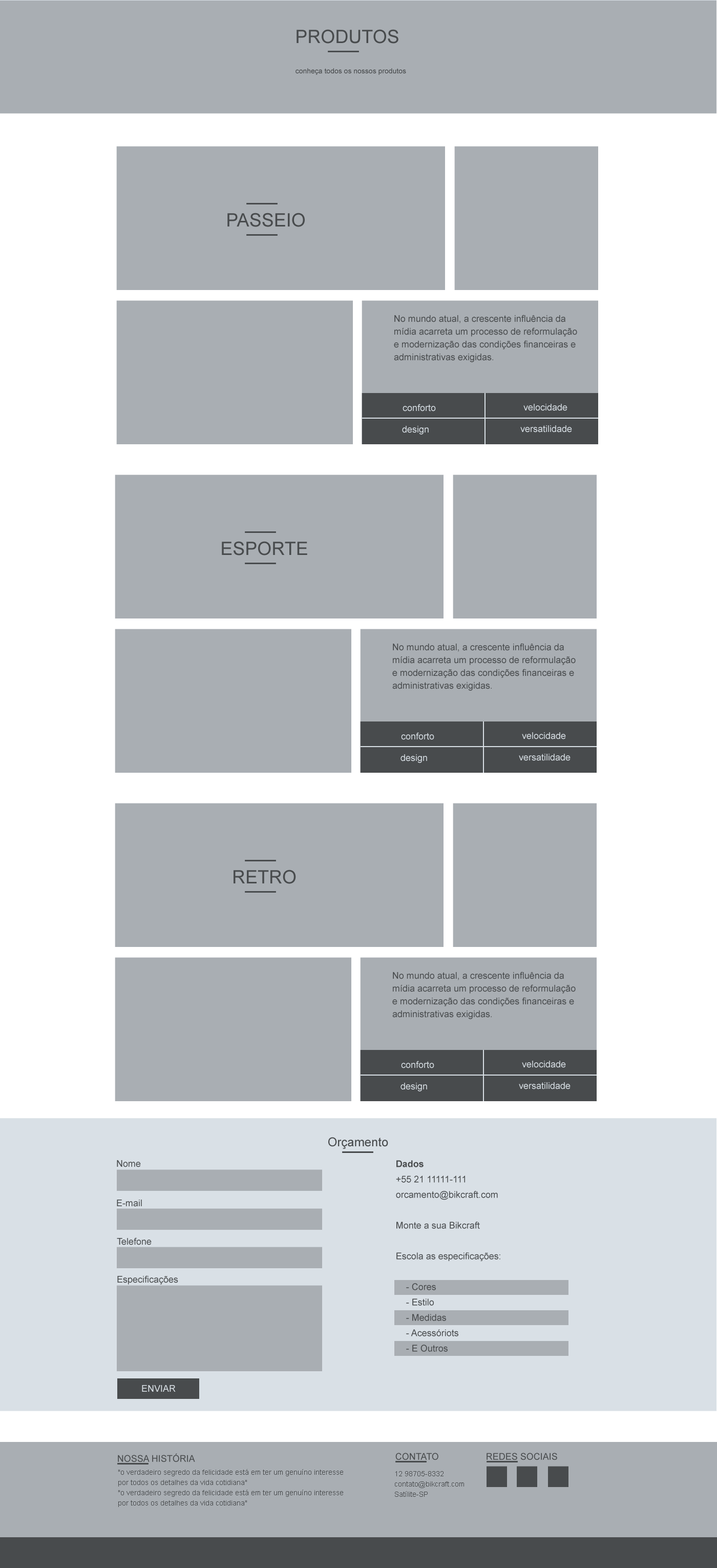
<style>
.page{position:relative;width:717px;height:1568px;background:#a9aeb3}
.page>*{position:absolute;margin:0}
.t1{font:18.4px "ArialMT";color:#484b4d;text-transform:uppercase}
.t2{font:7.2px "ArialMT";color:#484b4d}
.t3{font:9.2px/12.8px "ArialMT";color:#484b4d}
.t4{font:9.2px "ArialMT";color:#d9e0e6}
.t5{font:12.3px "ArialMT";color:#484b4d}
.t6{font:9.2px "ArialMT";color:#484b4d}
.t7{font:9.2px/15.4px "ArialMT";color:#484b4d}
.t8{font:9.2px/15.4px "Arial-BoldMT";color:#484b4d}
.t9{font:9.2px "ArialMT";color:#484b4d;text-transform:uppercase}
.t10{font:7.2px/10.2px "ArialMT";color:#484b4d}
</style>
<div class="page">
<p class="t1" style="left:297px;top:29px;width:102px;height:15px">PRODUTOS</p>
<p class="t2" style="left:296px;top:68px;width:110px;height:7px">conheça todos os nossos produtos</p>
<p class="t1" style="left:228px;top:213px;width:77px;height:14px">Passeio</p>
<p class="t3" style="left:394px;top:315px;width:183px;height:47px">No mundo atual, a crescente influência da mídia acarreta um processo de reformulação e modernização das condições financeiras e administrativas exigidas.</p>
<p class="t4" style="left:403px;top:404px;width:33px;height:7px">conforto</p>
<p class="t4" style="left:524px;top:404px;width:44px;height:7px">velocidade</p>
<p class="t4" style="left:402px;top:426px;width:27px;height:9px">design</p>
<p class="t4" style="left:521px;top:425px;width:51px;height:7px">versatilidade</p>
<p class="t1" style="left:222px;top:541px;width:85px;height:14px">esporte</p>
<p class="t3" style="left:393px;top:643px;width:183px;height:48px">No mundo atual, a crescente influência da mídia acarreta um processo de reformulação e modernização das condições financeiras e administrativas exigidas.</p>
<p class="t4" style="left:401px;top:732px;width:34px;height:8px">conforto</p>
<p class="t4" style="left:522px;top:732px;width:44px;height:7px">velocidade</p>
<p class="t4" style="left:401px;top:754px;width:26px;height:9px">design</p>
<p class="t4" style="left:519px;top:754px;width:52px;height:7px">versatilidade</p>
<p class="t1" style="left:234px;top:870px;width:62px;height:14px">retro</p>
<p class="t3" style="left:393px;top:972px;width:183px;height:47px">No mundo atual, a crescente influência da mídia acarreta um processo de reformulação e modernização das condições financeiras e administrativas exigidas.</p>
<p class="t4" style="left:401px;top:1061px;width:34px;height:7px">conforto</p>
<p class="t4" style="left:522px;top:1061px;width:44px;height:7px">velocidade</p>
<p class="t4" style="left:401px;top:1083px;width:26px;height:8px">design</p>
<p class="t4" style="left:519px;top:1082px;width:52px;height:7px">versatilidade</p>
<p class="t5" style="left:328px;top:1137px;width:60px;height:12px">Orçamento</p>
<p class="t6" style="left:117px;top:1160px;width:24px;height:7px">Nome</p>
<p class="t7" style="left:396px;top:1160px;width:105px;height:192px"><span class="t8">Dados<br></span>+55 21 11111-111<br>orcamento@bikcraft.com<br><br>Monte a sua Bikcraft<br><br>Escola as especificações:<br><br>    - Cores<br>    - Estilo<br>    - Medidas<br>    - Acessóriots<br>    - E Outros</p>
<p class="t6" style="left:117px;top:1200px;width:25px;height:7px">E-mail</p>
<p class="t6" style="left:117px;top:1237px;width:35px;height:8px">Telefone</p>
<p class="t6" style="left:117px;top:1275px;width:61px;height:10px">Especificações</p>
<p class="t4" style="left:142px;top:1385px;width:34px;height:7px">ENVIAR</p>
<p class="t9" style="left:118px;top:1453px;width:77px;height:9px">Nossa História</p>
<p class="t9" style="left:396px;top:1453px;width:43px;height:7px">contato</p>
<p class="t9" style="left:487px;top:1453px;width:71px;height:7px">REDES SOCIAIS</p>
<p class="t10" style="left:118px;top:1469px;width:225px;height:38px;text-align:center">"o verdadeiro segredo da felicidade está em ter um genuíno interesse por todos os detalhes da vida cotidiana"<br>"o verdadeiro segredo da felicidade está em ter um genuíno interesse por todos os detalhes da vida cotidiana"</p>
<p class="t10" style="left:395px;top:1471px;width:69px;height:26px">12 98705-8332<br>contato@bikcraft.com<br>Satílite-SP</p>
</div>
